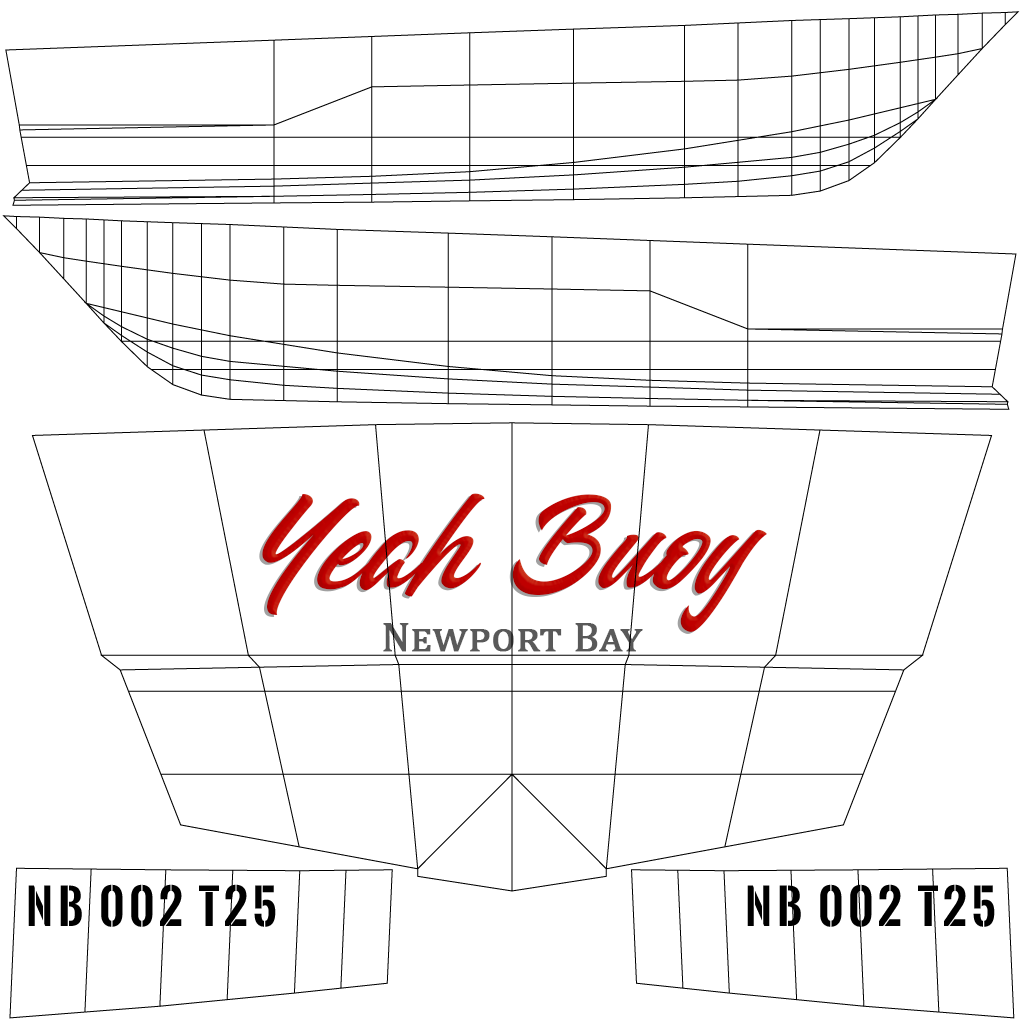
<style>
.page{position:relative;width:1024px;height:1024px;background:#ffffff}
.page>*{position:absolute;margin:0}
.t1{font:108.9px "Fabiana-Regular";color:#bf0000;font-style:italic}
.t2{font:41.7px "Cambria";color:#595959;font-variant:small-caps;font-weight:bold}
.t3{font:46.6px "OswaldStencil-Bold";letter-spacing:0.1em;color:#000000}
</style>
<div class="page">
<p class="t1" style="left:262px;top:493px;width:505px;height:139px">Yeah Buoy</p>
<p class="t2" style="left:383px;top:623px;width:260px;height:29px">Newport Bay</p>
<p class="t3" style="left:28px;top:884px;width:248px;height:43px">NB 002 T25</p>
<p class="t3" style="left:747px;top:884px;width:248px;height:43px">NB 002 T25</p>
</div>
